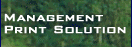
<style>
.page{position:relative;width:132px;height:47px}
.page>*{position:absolute;margin:0}
.t1{font:14px/12px "BankGothicBT-Medium";color:#ffffff;font-weight:bold}
</style>
<div class="page">
<p class="t1" style="left:4px;top:13px;width:122px;height:21px">Management<br>Print Solution</p>
</div>
